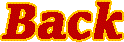
<style>
.page{position:relative;width:124px;height:42px;background:#bb0000}
.page>*{position:absolute;margin:0}
.t1{font:52.9px "SitkaText-BoldItalic";color:#c00007;font-weight:bold;scale:0.93 1}
</style>
<div class="page">
<p class="t1" style="left:2px;top:2px;width:120px;height:38px">Back</p>
</div>
